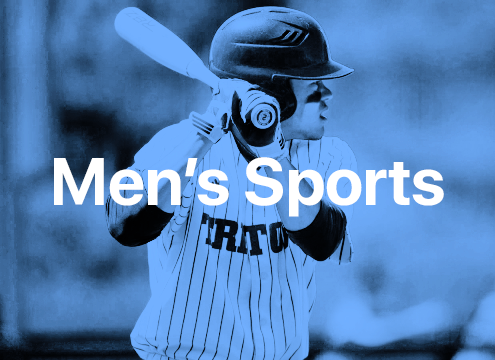
<style>
.page{position:relative;width:495px;height:360px}
.page>*{position:absolute;margin:0}
.t1{font:66.7px "SFUIDisplay-Bold";color:#ffffff}
</style>
<div class="page">
<p class="t1" style="left:54px;top:157px;width:390px;height:60px">Men’s Sports</p>
</div>
